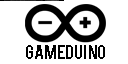
<style>
.page{position:relative;width:128px;height:64px;background:#ffffff}
.page>*{position:absolute;margin:0}
.t1{font:16.5px "Bebas";letter-spacing:0.03em;color:#000000}
</style>
<div class="page">
<p class="t1" style="left:26px;top:45px;width:79px;height:14px">gameduino</p>
</div>
